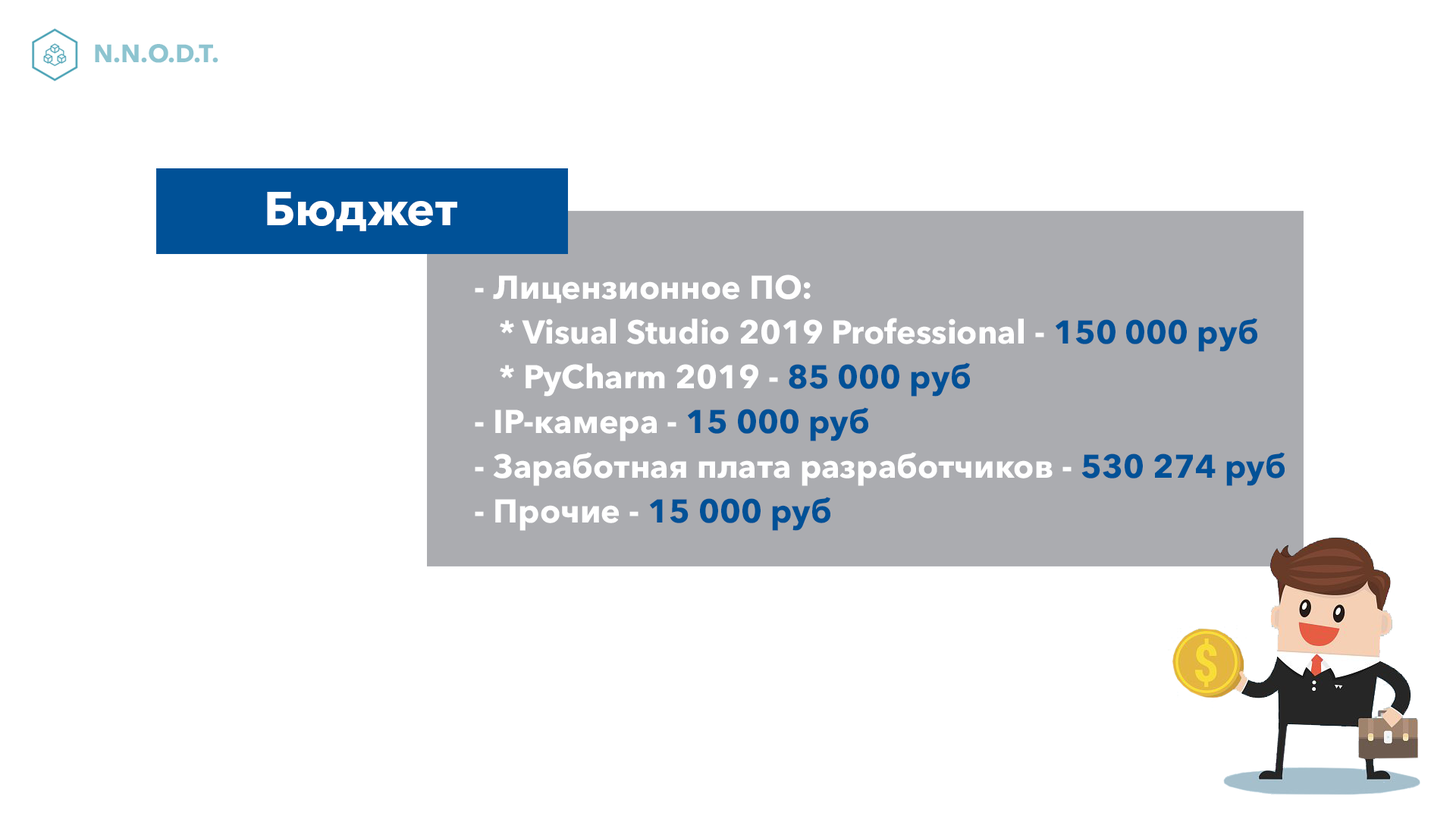
<style>
.page{position:relative;width:1456px;height:819px;background:#ffffff}
.page>*{position:absolute;margin:0}
.t1{font:25px "AvenirNextCyr-Bold";color:#8dc4d0}
.t2{font:47.3px "AvenirNextCyr-Bold";color:#ffffff}
.t3{font:32.9px/44.2px "AvenirNextCyr-Bold";color:#ffffff}
.t4{font:32.9px/44.2px "AvenirNextCyr-Bold";color:#005197}
</style>
<div class="page">
<p class="t1" style="left:95px;top:44px;width:123px;height:19px">N.N.O.D.T.</p>
<p class="t2" style="left:267px;top:192px;width:190px;height:39px">Бюджет</p>
<p class="t3" style="left:475px;top:275px;width:810px;height:256px">- Лицензионное ПО: <br>   * Visual Studio 2019 Professional - <span class="t4">150 000 руб<br></span>   * PyCharm 2019 - <span class="t4">85 000 руб<br></span>- IP-камера - <span class="t4">15 000 руб<br></span>- Заработная плата разработчиков - <span class="t4">530 274 руб<br></span>- Прочие - <span class="t4">15 000 руб</span></p>
</div>
